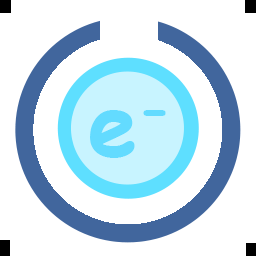
<style>
.page{position:relative;width:256px;height:256px;background:#ffffff}
.page>*{position:absolute;margin:0}
.t1{font:89.7px "ComicSansMS-Bold";color:#63dbff}
.t2{font:89.7px "ComicSansMS-Bold";color:#63dbff;font-weight:bold}
</style>
<div class="page">
<p class="t1" style="left:90px;top:110px;width:76px;height:48px">e<span class="t2">-</span></p>
</div>
